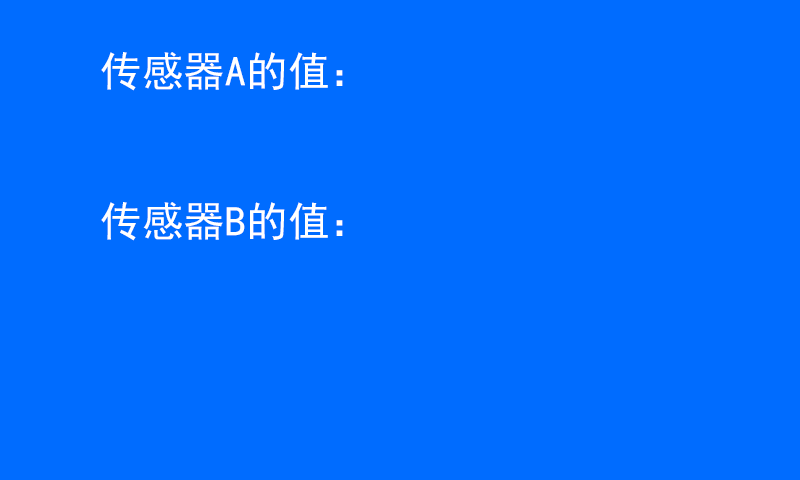
<style>
.page{position:relative;width:800px;height:480px;background:#006cff}
.page>*{position:absolute;margin:0}
.t1{font:41.7px "SimHei";color:#ffffff}
</style>
<div class="page">
<p class="t1" style="left:101px;top:52px;width:242px;height:39px">传感器A的值：</p>
<p class="t1" style="left:101px;top:202px;width:242px;height:39px">传感器B的值：</p>
</div>
